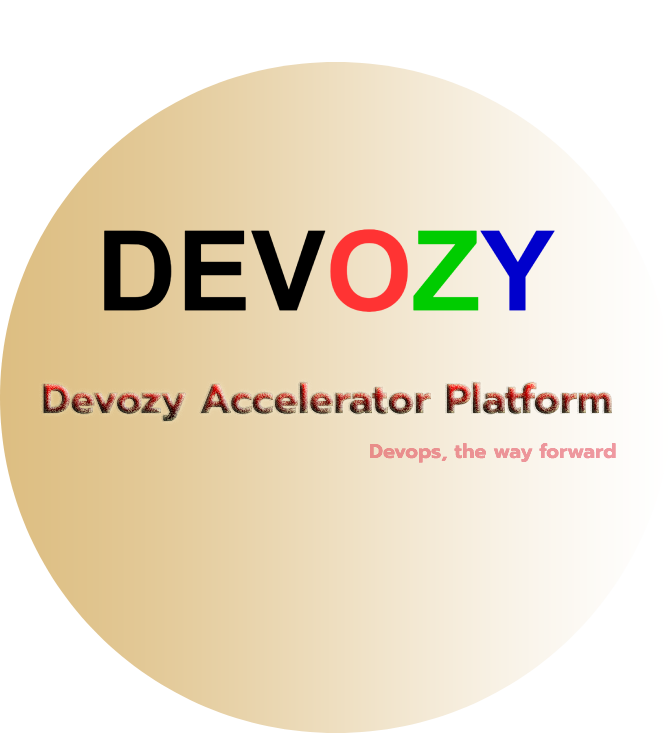
<style>
.page{position:relative;width:672px;height:733px;background:#ffffff}
.page>*{position:absolute;margin:0}
.t1{font:41px "Prompt-Bold"}
.t2{font:20px "Prompt-Bold";color:#ec9497}
</style>
<div class="page">
<p class="t1" style="left:43px;top:382px;width:569px;height:40px">Devozy Accelerator Platform</p>
<p class="t2" style="left:369px;top:443px;width:247px;height:20px">Devops, the way forward</p>
</div>
